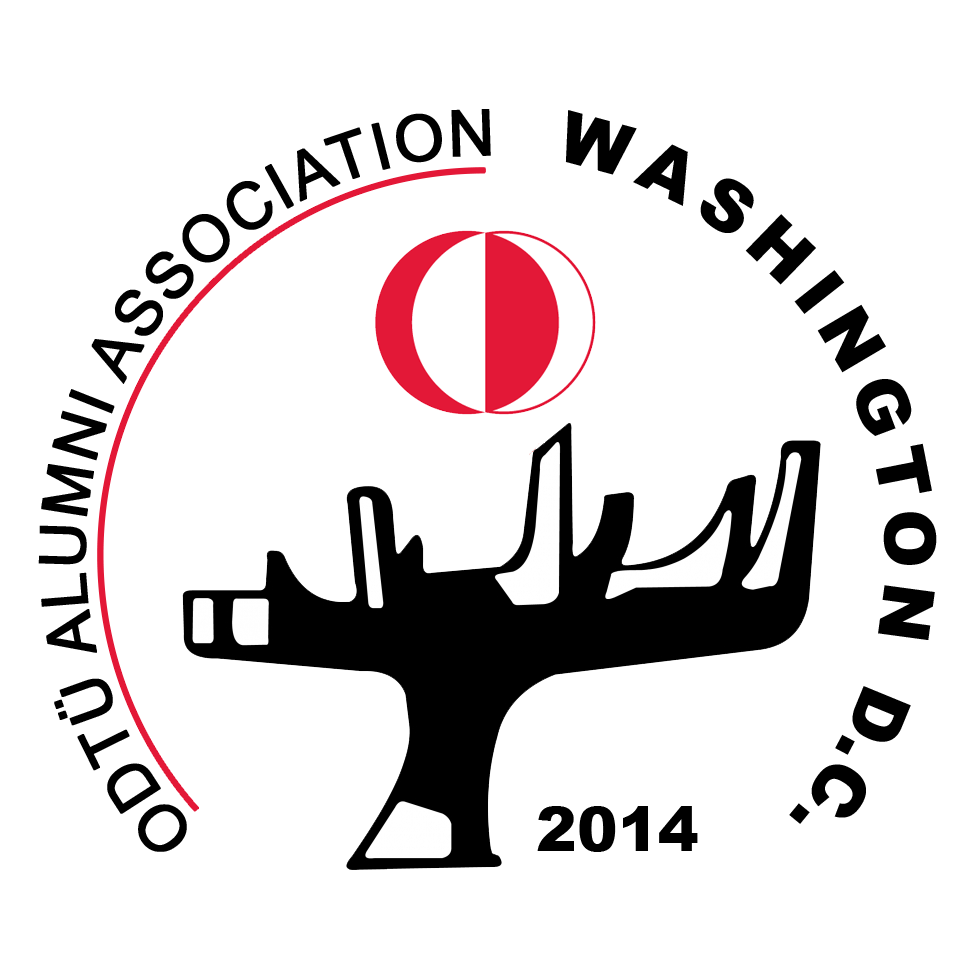
<style>
.page{position:relative;width:970px;height:970px;background:#ffffff}
.page>*{position:absolute;margin:0}
.t1{font:64px "ArialMT";letter-spacing:0.015em;color:#000000;font-weight:bold}
.t2{font:61px "ArialMT";letter-spacing:0.006em;color:#000000;font-weight:bold}
.t3{font:71px "Arial-Black";letter-spacing:0.145em;color:#000000}
.t4{font:71px "Arial-Black";color:#000000;scale:1.1 1}
.t5{font:71px "Arial-Black";letter-spacing:0.005em;color:#000000}
.t6{font:61px "Arial-Black";color:#000000}
</style>
<div class="page">
<p class="t1" style="left:38px;top:109px;width:453px;height:743px"><span class="t2">                 </span>ODTÜ ALUMNI ASSOCIATION</p>
<p class="t3" style="left:565px;top:110px;width:372px;height:714px"><span class="t4">                                                  </span>WASHINGTON <span class="t5">D.C.</span></p>
<p class="t6" style="left:537px;top:806px;width:161px;height:46px">2014</p>
</div>
